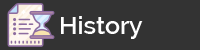
<style>
.page{position:relative;width:200px;height:50px;background:#333333}
.page>*{position:absolute;margin:0}
.t1{font:25px "Raleway-SemiBold";color:#ffffff}
</style>
<div class="page">
<p class="t1" style="left:61px;top:16px;width:82px;height:23px">History</p>
</div>
